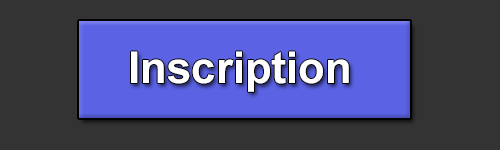
<style>
.page{position:relative;width:500px;height:150px;background:#333333}
.page>*{position:absolute;margin:0}
.t1{font:43.8px "Arial-BoldMT";color:#ffffff}
</style>
<div class="page">
<p class="t1" style="left:131px;top:51px;width:218px;height:41px">Inscription</p>
</div>
